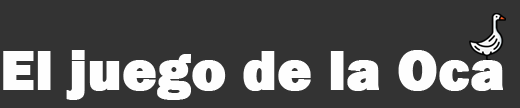
<style>
.page{position:relative;width:520px;height:108px;background:#333333}
.page>*{position:absolute;margin:0}
.t1{font:57px "FranklinGothic-Heavy";color:#fefefe;font-weight:bold}
</style>
<div class="page">
<p class="t1" style="left:3px;top:50px;width:500px;height:50px">El juego de la Oca</p>
</div>
